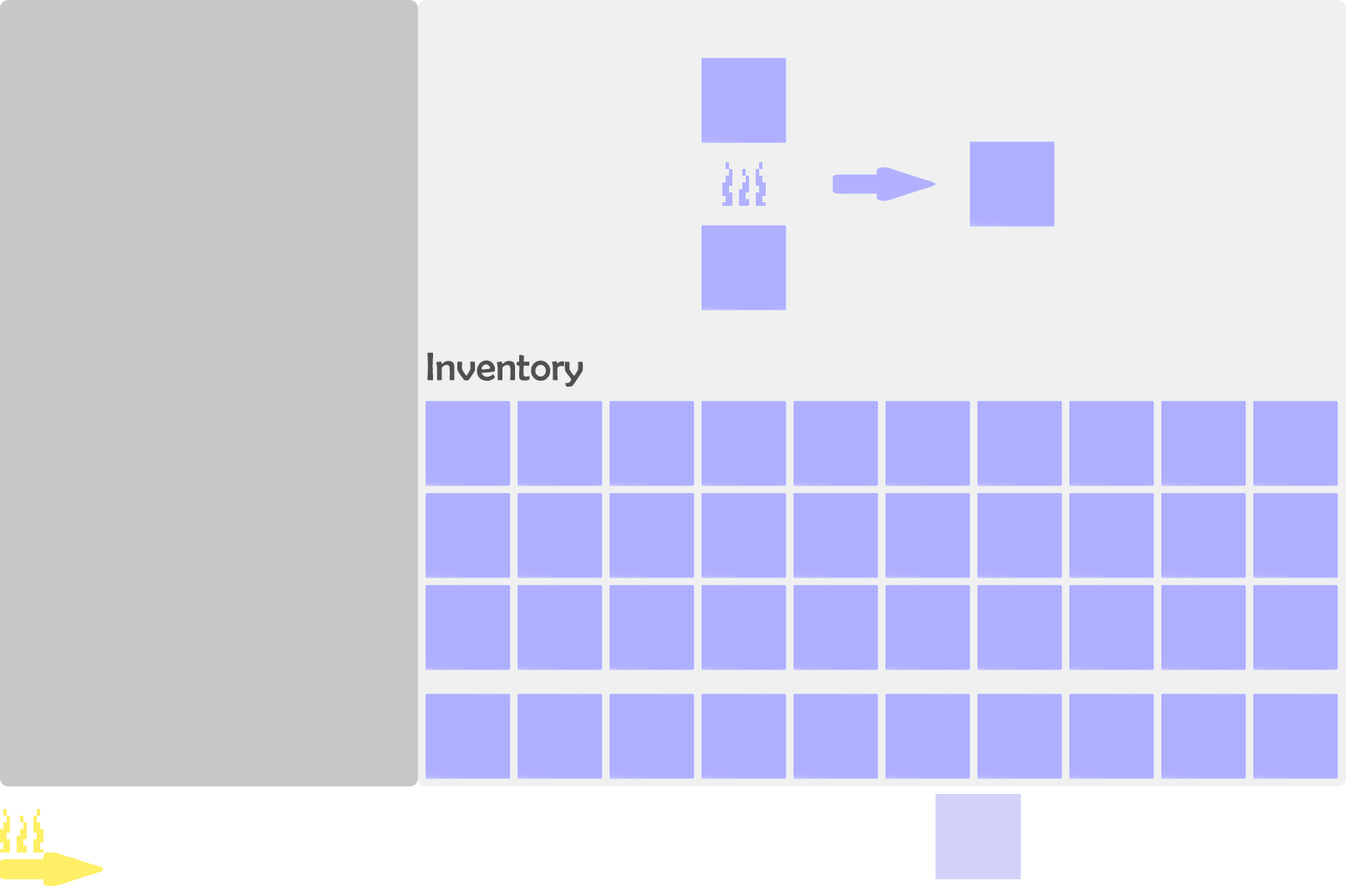
<style>
.page{position:relative;width:1346px;height:886px;background:#f0f0f0}
.page>*{position:absolute;margin:0}
.t1{font:40.1px "BerlinSansFB-Reg";color:#515050}
</style>
<div class="page">
<p class="t1" style="left:427px;top:352px;width:157px;height:35px">Inventory</p>
</div>
